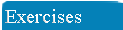
<style>
.page{position:relative;width:123px;height:30px;background:#0481b8}
.page>*{position:absolute;margin:0}
.t1{font:20px "TimesNewRomanPSMT";color:#fafafa}
</style>
<div class="page">
<p class="t1" style="left:5px;top:9px;width:76px;height:14px">Exercises</p>
</div>
